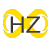
<style>
.page{position:relative;width:50px;height:50px;background:#ffffff}
.page>*{position:absolute;margin:0}
.t1{font:34.1px "THSarabunPSK-Bold";color:#3c3837}
</style>
<div class="page">
<p class="t1" style="left:10px;top:16px;width:31px;height:17px">HZ</p>
</div>
